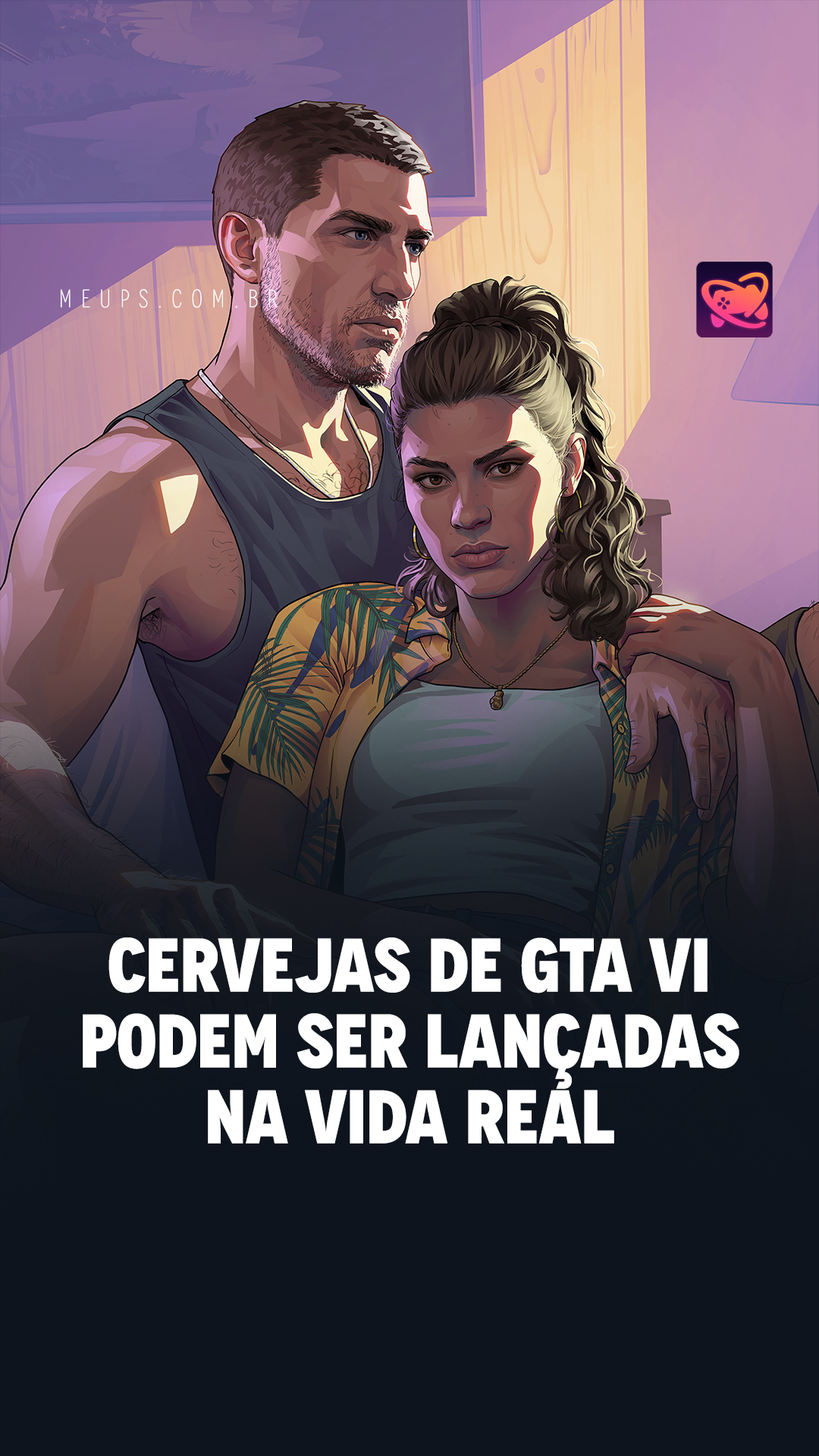
<style>
.page{position:relative;width:819px;height:1456px;background:#0d141d}
.page>*{position:absolute;margin:0}
.t1{font:25.3px "Novecento-CondLight";letter-spacing:0.375em;color:#ffffff}
.t2{font:75.8px/75.8px "Novecento-CondUltraBold";color:#ffffff}
</style>
<div class="page">
<p class="t1" style="left:61px;top:289px;width:216px;height:19px">MEUPS.COM.BR</p>
<p class="t2" style="left:83px;top:937px;width:656px;height:207px;text-align:center">Cervejas de GTA VI podem ser lançadas na vida real</p>
</div>
